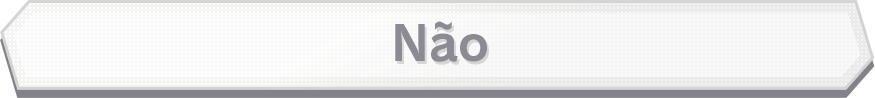
<style>
.page{position:relative;width:875px;height:98px;background:#fbfafb}
.page>*{position:absolute;margin:0}
.t1{font:48px "RodinPro-B";color:#8c8b93}
</style>
<div class="page">
<p class="t1" style="left:395px;top:21px;width:92px;height:41px">Não</p>
</div>
